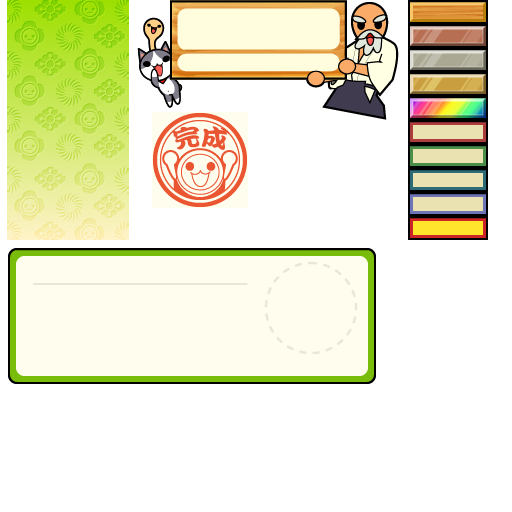
<style>
.page{position:relative;width:512px;height:512px;background:#ffffff}
.page>*{position:absolute;margin:0}
.t1{font:24px "DFPKanTingLiuW9";color:#ea5532}
</style>
<div class="page">
<p class="t1" style="left:172px;top:126px;width:56px;height:24px">完成</p>
</div>
